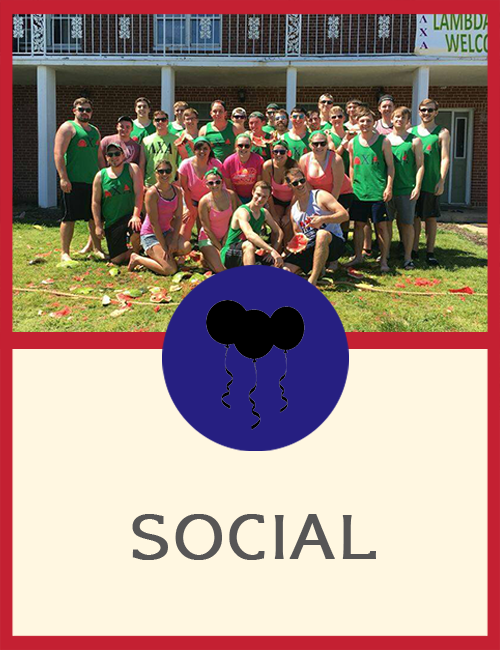
<style>
.page{position:relative;width:500px;height:650px;background:#fff7e1}
.page>*{position:absolute;margin:0}
.t1{font:69.2px "GFSNeohellenic-Regular";color:#575656;font-weight:bold;scale:1.1 1}
</style>
<div class="page">
<p class="t1" style="left:132px;top:514px;width:244px;height:46px">SOCIAL</p>
</div>
